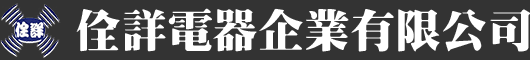
<style>
.page{position:relative;width:530px;height:60px;background:#333333}
.page>*{position:absolute;margin:0}
.t1{font:45.8px "HanWangMingBlack";color:#ffffff}
</style>
<div class="page">
<p class="t1" style="left:76px;top:8px;width:455px;height:44px">佺詳電器企業有限公司</p>
</div>
